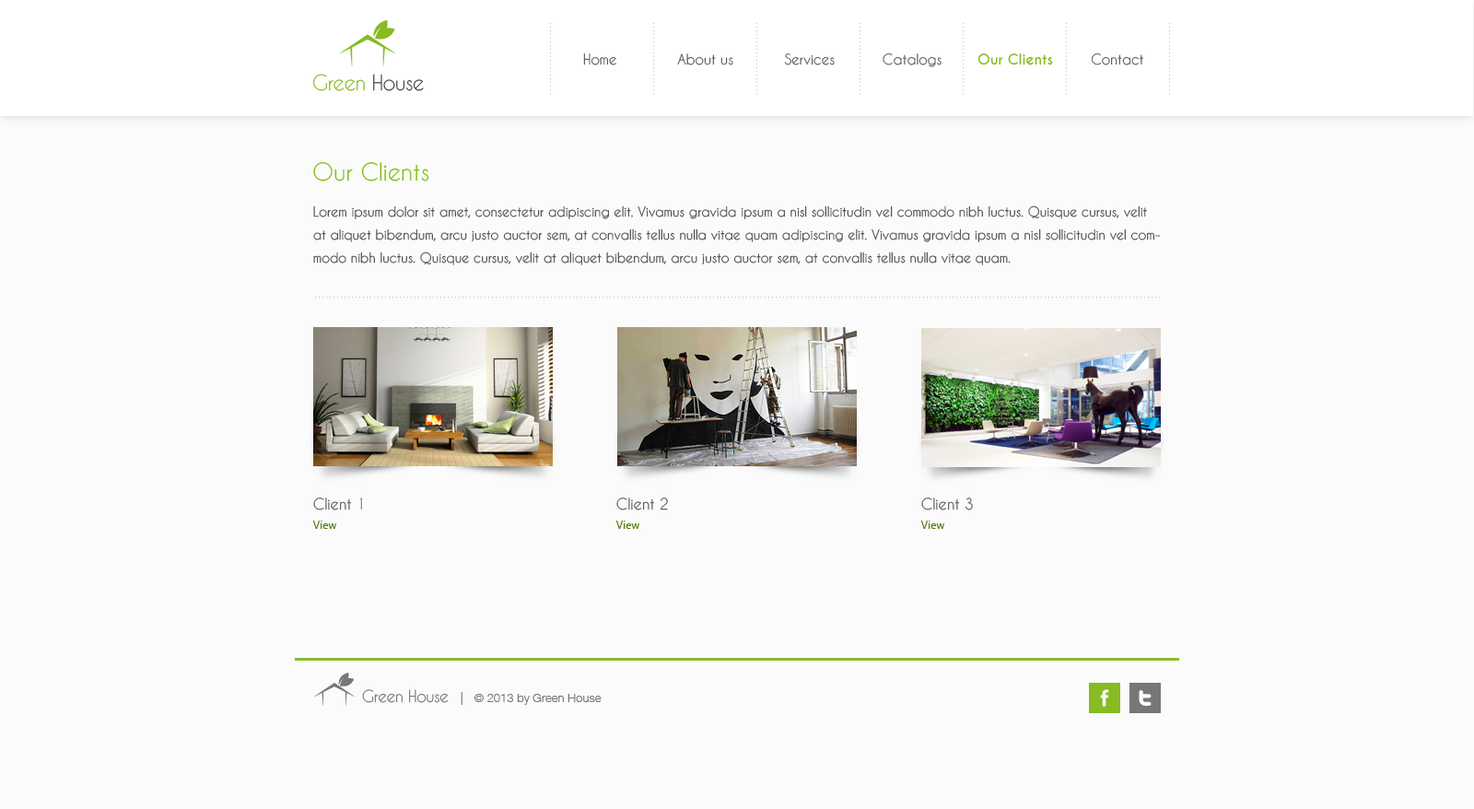
<style>
.page{position:relative;width:1474px;height:809px;background:#fbfbfb}
.page>*{position:absolute;margin:0}
.t1{font:13.8px "CaviarDreams";color:#555555}
.t2{font:13.8px "CaviarDreams-Bold";color:#87bb23}
.t3{font:20.3px "CaviarDreams";letter-spacing:-0.025em;color:#87bb23}
.t4{font:20.3px "CaviarDreams";letter-spacing:-0.025em;color:#444444}
.t5{font:23px "CaviarDreams";color:#83bb15}
.t6{font:12.9px/23px "CaviarDreams";color:#555555}
.t7{font:14.7px/19.3px "CaviarDreams";color:#555555}
.t8{font:11.1px/19.3px "SegoeUI";color:#577d0a}
.t9{font:15.7px "CaviarDreams";letter-spacing:-0.025em;color:#777777}
.t10{font:12px "HelveticaNeueW02-45Light";color:#777777}
.t11{font:12.9px "HelveticaNeueW02-45Light";color:#777777}
</style>
<div class="page">
<p class="t1" style="left:583px;top:53px;width:560px;height:14px">Home         About us            Services       Catalogs   <span class="t2">Our Clients        </span>Contact</p>
<p class="t3" style="left:312px;top:74px;width:112px;height:17px">Green <span class="t4">House</span></p>
<p class="t5" style="left:313px;top:162px;width:116px;height:19px">Our Clients</p>
<p class="t6" style="left:313px;top:205px;width:847px;height:60px">Lorem ipsum dolor sit amet, consectetur adipiscing elit. Vivamus gravida ipsum a nisl sollicitudin vel commodo nibh luctus. Quisque cursus, velit at aliquet bibendum, arcu justo auctor sem, at convallis tellus nulla vitae quam adipiscing elit. Vivamus gravida ipsum a nisl sollicitudin vel commodo nibh luctus. Quisque cursus, velit at aliquet bibendum, arcu justo auctor sem, at convallis tellus nulla vitae quam.</p>
<p class="t7" style="left:312px;top:498px;width:50px;height:31px">Client 1      <span class="t8">View</span></p>
<p class="t7" style="left:615px;top:498px;width:53px;height:31px">Client 2<br><span class="t8">View</span></p>
<p class="t7" style="left:920px;top:498px;width:53px;height:31px">Client 3<br><span class="t8">View</span></p>
<p class="t9" style="left:362px;top:689px;width:87px;height:14px">Green House</p>
<p class="t10" style="left:461px;top:692px;width:141px;height:13px"><span class="t11">|   </span>© 2013 by Green House</p>
</div>
